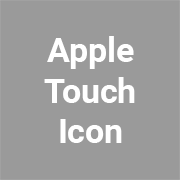
<style>
.page{position:relative;width:180px;height:180px;background:#9a9a9a}
.page>*{position:absolute;margin:0}
.t1{font:33.8px "Roboto-Bold";color:#ffffff}
</style>
<div class="page">
<p class="t1" style="left:44px;top:36px;width:91px;height:107px;text-align:center">Apple<br>Touch<br>Icon</p>
</div>
